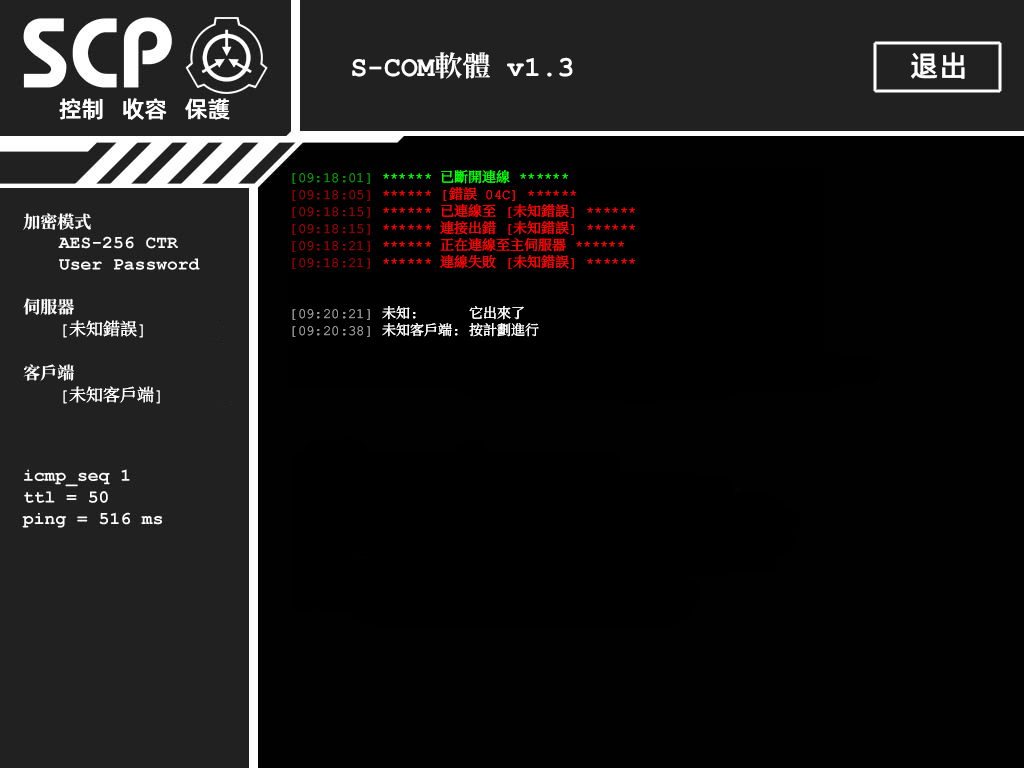
<style>
.page{position:relative;width:1024px;height:768px;background:#010101}
.page>*{position:absolute;margin:0}
.t1{font:28px "ContainmentBreach-Bold";color:#ffffff}
.t2{font:29px "AlibabaPuHuiTiM";color:#ffffff}
.t3{font:23px "AlibabaPuHuiTiM";color:#ffffff}
.t4{font:14px/17px "ContainmentBreach-Regular";color:#ff0000}
.t5{font:14px/17px "ContainmentBreach-Regular";color:#009600}
.t6{font:14px/17px "ContainmentBreach-Regular";color:#00ff00}
.t7{font:14px/17px "ContainmentBreach-Regular";color:#960000}
.t8{font:14px/17px "ContainmentBreach-Regular";color:#969696}
.t9{font:14px/17px "ContainmentBreach-Regular";color:#ffffff}
.t10{font:17px/22px "ContainmentBreach-Regular";color:#ffffff}
.t11{font:17px/17px "ContainmentBreach-Bold";color:#ffffff}
.t12{font:17px/22px "ContainmentBreach-Bold";color:#ffffff}
.t13{font:17px/18px "ContainmentBreach-Regular";color:#ffffff}
</style>
<div class="page">
<p class="t1" style="left:352px;top:52px;width:221px;height:27px">S-COM軟體 v1.3</p>
<p class="t2" style="left:911px;top:52px;width:54px;height:27px">退出</p>
<p class="t3" style="left:59px;top:98px;width:171px;height:22px">控制   收容   保護</p>
<p class="t4" style="left:292px;top:170px;width:343px;height:167px"><span class="t5">[09:18：01]</span><span class="t6"> ****** 已斷開連線 ******<br></span><span class="t7">[09:18:05]</span> ****** [錯誤 04C] ******<br><span class="t7">[09:18:15]</span> ****** 已連線至 [未知錯誤] ******<br><span class="t7">[09:18:15]</span> ****** 連接出錯 [未知錯誤] ******<br><span class="t7">[09:18:21]</span> ****** 正在連線至主伺服器 ******<br><span class="t7">[09:18:21]</span> ****** 連線失敗 [未知錯誤] ******<br><br><br><span class="t8">【09:20:21】</span><span class="t9"> 未知：  它出來了<br></span><span class="t8">【09:20:38】</span><span class="t9"> 未知客戶端： 按計劃進行</span></p>
<p class="t10" style="left:23px;top:213px;width:137px;height:191px"><span class="t11">加密模式<br><br><br><br><br></span><span class="t12">伺服器<br> </span><span class="t13">[未知錯誤]<br><br></span><span class="t12">客戶端<br> </span>[未知客戶端]</p>
</div>
